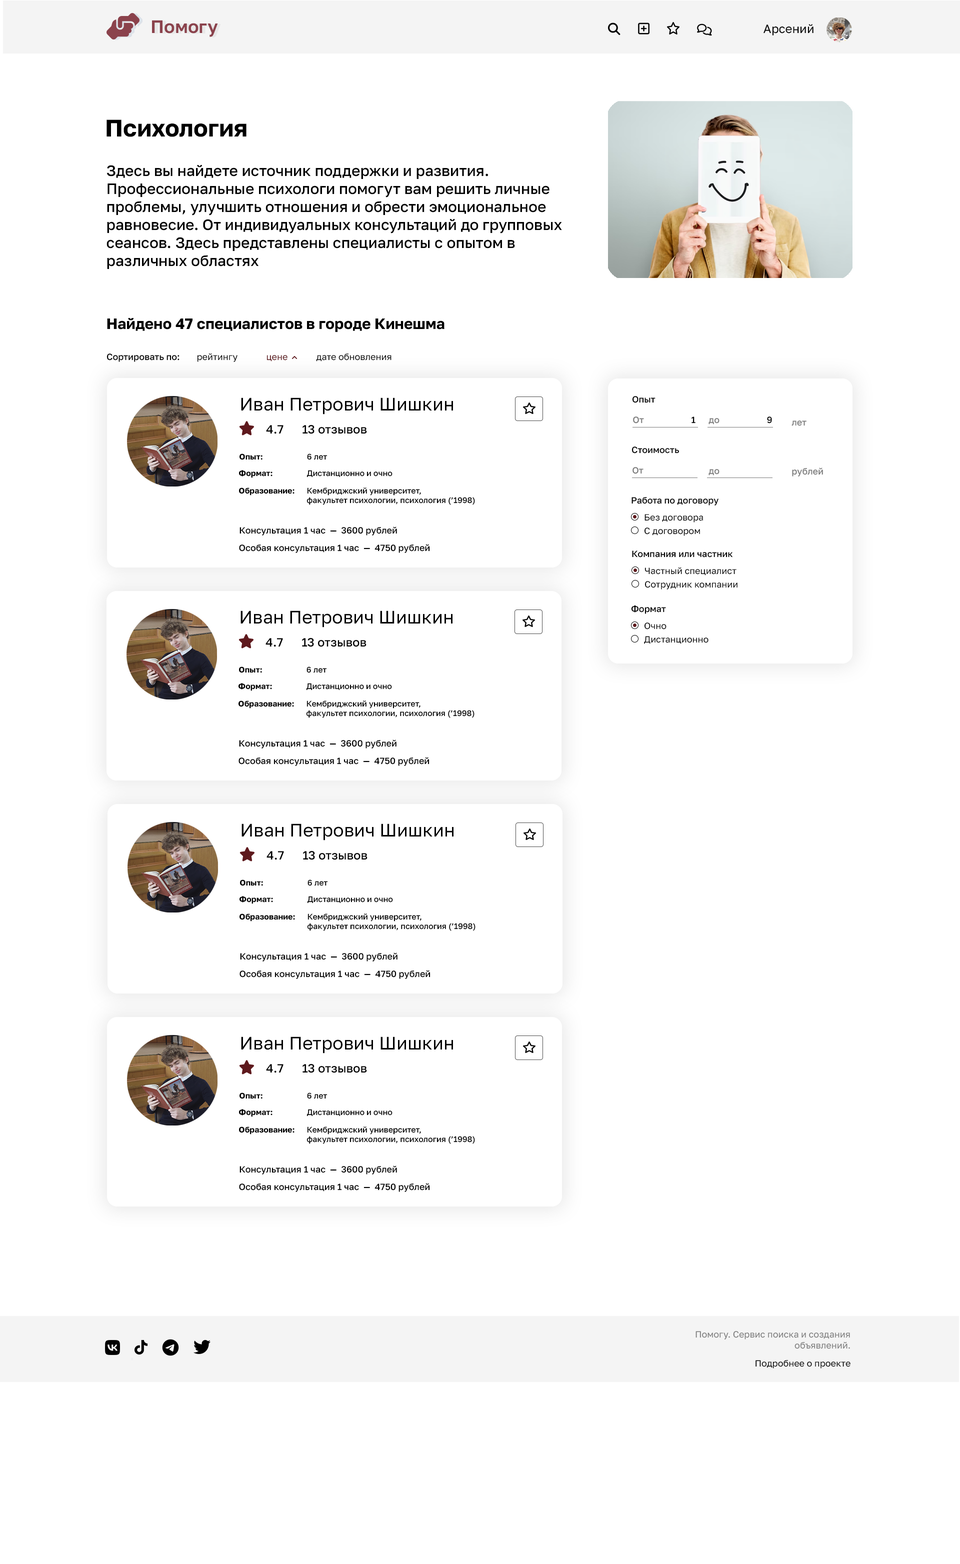
<style>
.page{position:relative;width:960px;height:1564px;background:#ffffff}
.page>*{position:absolute;margin:0}
.t1{font:18px "GolosText-SemiBold";color:#8b424c}
.t2{font:12px "GolosText-Regular";color:#000000}
.t3{font:24px "GolosText-Bold";color:#000000}
.t4{font:15px "GolosText-Medium";color:#000000}
.t5{font:15px "GolosText-Bold";color:#000000}
.t6{font:9px "GolosText-Medium";color:#000000}
.t7{font:9px "GolosText-Regular";color:#000000}
.t8{font:9px "GolosText-Regular";color:#5e191d}
.t9{font:18px "GolosText-Regular";color:#000000}
.t10{font:12px "GolosText-Medium";color:#000000}
.t11{font:9px "GolosText-Medium";color:#7c7c7c}
.t12{font:8px "GolosText-Bold";color:#000000}
.t13{font:8px "GolosText-Medium";color:#000000}
.t14{font:9px "GolosText-Regular";color:#7c7c7c}
</style>
<div class="page">
<p class="t1" style="left:152px;top:20px;width:66px;height:17px">Помогу</p>
<p class="t2" style="left:764px;top:24px;width:50px;height:12px">Арсений</p>
<p class="t3" style="left:106px;top:120px;width:140px;height:17px">Психология</p>
<p class="t4" style="left:106px;top:165px;width:456px;height:104px">Здесь вы найдете источник поддержки и развития. Профессиональные психологи помогут вам решить личные проблемы, улучшить отношения и обрести эмоциональное равновесие. От индивидуальных консультаций до групповых сеансов. Здесь представлены специалисты с опытом в различных областях</p>
<p class="t5" style="left:107px;top:318px;width:337px;height:14px">Найдено 47 специалистов в городе Кинешма</p>
<p class="t6" style="left:106px;top:354px;width:74px;height:8px">Сортировать по:</p>
<p class="t7" style="left:197px;top:353px;width:41px;height:9px">рейтингу</p>
<p class="t7" style="left:316px;top:354px;width:76px;height:8px">дате обновления</p>
<p class="t8" style="left:266px;top:355px;width:22px;height:7px">цене</p>
<p class="t9" style="left:241px;top:398px;width:212px;height:16px">Иван Петрович Шишкин</p>
<p class="t6" style="left:632px;top:396px;width:24px;height:7px">Опыт</p>
<p class="t10" style="left:266px;top:425px;width:18px;height:9px">4.7</p>
<p class="t10" style="left:302px;top:425px;width:65px;height:9px">13 отзывов</p>
<p class="t11" style="left:633px;top:416px;width:63px;height:8px">От                     <span class="t6">1</span></p>
<p class="t11" style="left:708px;top:416px;width:64px;height:8px">до                     <span class="t6">9</span></p>
<p class="t11" style="left:792px;top:420px;width:14px;height:6px">лет</p>
<p class="t6" style="left:632px;top:446px;width:47px;height:8px">Стоимость</p>
<p class="t12" style="left:240px;top:454px;width:88px;height:6px">Опыт:                      <span class="t13">6 лет</span></p>
<p class="t13" style="left:239px;top:470px;width:153px;height:8px"><span class="t12">Формат:                 </span>Дистанционно и очно</p>
<p class="t11" style="left:632px;top:467px;width:12px;height:7px">От</p>
<p class="t11" style="left:708px;top:469px;width:12px;height:7px">до</p>
<p class="t11" style="left:792px;top:468px;width:31px;height:8px">рублей</p>
<p class="t13" style="left:239px;top:488px;width:236px;height:17px"><span class="t12">Образование:      </span>Кембриджский университет,<br>          факультет психологии, психология (’1998)</p>
<p class="t6" style="left:632px;top:497px;width:86px;height:9px">Работа по договору</p>
<p class="t7" style="left:644px;top:514px;width:59px;height:8px">Без договора</p>
<p class="t6" style="left:240px;top:526px;width:157px;height:10px">Консультация 1 час  —  3600 рублей</p>
<p class="t7" style="left:644px;top:528px;width:56px;height:8px">С договором</p>
<p class="t6" style="left:239px;top:544px;width:191px;height:9px">Особая консультация 1 час  —  4750 рублей</p>
<p class="t6" style="left:632px;top:550px;width:101px;height:8px">Компания или частник</p>
<p class="t7" style="left:644px;top:567px;width:92px;height:9px">Частный специалист</p>
<p class="t7" style="left:644px;top:581px;width:94px;height:9px">Сотрудник компании</p>
<p class="t6" style="left:631px;top:605px;width:35px;height:9px">Формат</p>
<p class="t9" style="left:240px;top:610px;width:212px;height:18px">Иван Петрович Шишкин</p>
<p class="t7" style="left:644px;top:622px;width:22px;height:8px">Очно</p>
<p class="t10" style="left:266px;top:638px;width:17px;height:9px">4.7</p>
<p class="t10" style="left:302px;top:638px;width:64px;height:9px">13 отзывов</p>
<p class="t7" style="left:644px;top:636px;width:64px;height:8px">Дистанционно</p>
<p class="t12" style="left:239px;top:666px;width:88px;height:7px">Опыт:                      <span class="t13">6 лет</span></p>
<p class="t13" style="left:238px;top:683px;width:154px;height:8px"><span class="t12">Формат:                 </span>Дистанционно и очно</p>
<p class="t13" style="left:238px;top:700px;width:236px;height:18px"><span class="t12">Образование:      </span>Кембриджский университет,<br>          факультет психологии, психология (’1998)</p>
<p class="t6" style="left:239px;top:740px;width:157px;height:8px">Консультация 1 час  —  3600 рублей</p>
<p class="t6" style="left:238px;top:757px;width:192px;height:9px">Особая консультация 1 час  —  4750 рублей</p>
<p class="t9" style="left:242px;top:824px;width:212px;height:16px">Иван Петрович Шишкин</p>
<p class="t10" style="left:266px;top:851px;width:18px;height:9px">4.7</p>
<p class="t10" style="left:303px;top:851px;width:65px;height:9px">13 отзывов</p>
<p class="t12" style="left:240px;top:880px;width:88px;height:6px">Опыт:                      <span class="t13">6 лет</span></p>
<p class="t13" style="left:240px;top:896px;width:153px;height:8px"><span class="t12">Формат:                 </span>Дистанционно и очно</p>
<p class="t13" style="left:240px;top:914px;width:236px;height:17px"><span class="t12">Образование:      </span>Кембриджский университет,<br>          факультет психологии, психология (’1998)</p>
<p class="t6" style="left:240px;top:952px;width:158px;height:10px">Консультация 1 час  —  3600 рублей</p>
<p class="t6" style="left:240px;top:970px;width:190px;height:9px">Особая консультация 1 час  —  4750 рублей</p>
<p class="t9" style="left:241px;top:1036px;width:212px;height:18px">Иван Петрович Шишкин</p>
<p class="t10" style="left:266px;top:1064px;width:18px;height:9px">4.7</p>
<p class="t10" style="left:302px;top:1064px;width:65px;height:9px">13 отзывов</p>
<p class="t12" style="left:240px;top:1092px;width:88px;height:7px">Опыт:                      <span class="t13">6 лет</span></p>
<p class="t13" style="left:239px;top:1109px;width:153px;height:8px"><span class="t12">Формат:                 </span>Дистанционно и очно</p>
<p class="t13" style="left:239px;top:1126px;width:236px;height:18px"><span class="t12">Образование:      </span>Кембриджский университет,<br>          факультет психологии, психология (’1998)</p>
<p class="t6" style="left:240px;top:1166px;width:157px;height:8px">Консультация 1 час  —  3600 рублей</p>
<p class="t6" style="left:239px;top:1183px;width:191px;height:9px">Особая консультация 1 час  —  4750 рублей</p>
<p class="t14" style="left:696px;top:1331px;width:154px;height:18px;text-align:right">Помогу. Сервис поиска и создания<br>объявлений.</p>
<p class="t7" style="left:756px;top:1360px;width:94px;height:8px">Подробнее о проекте</p>
</div>
